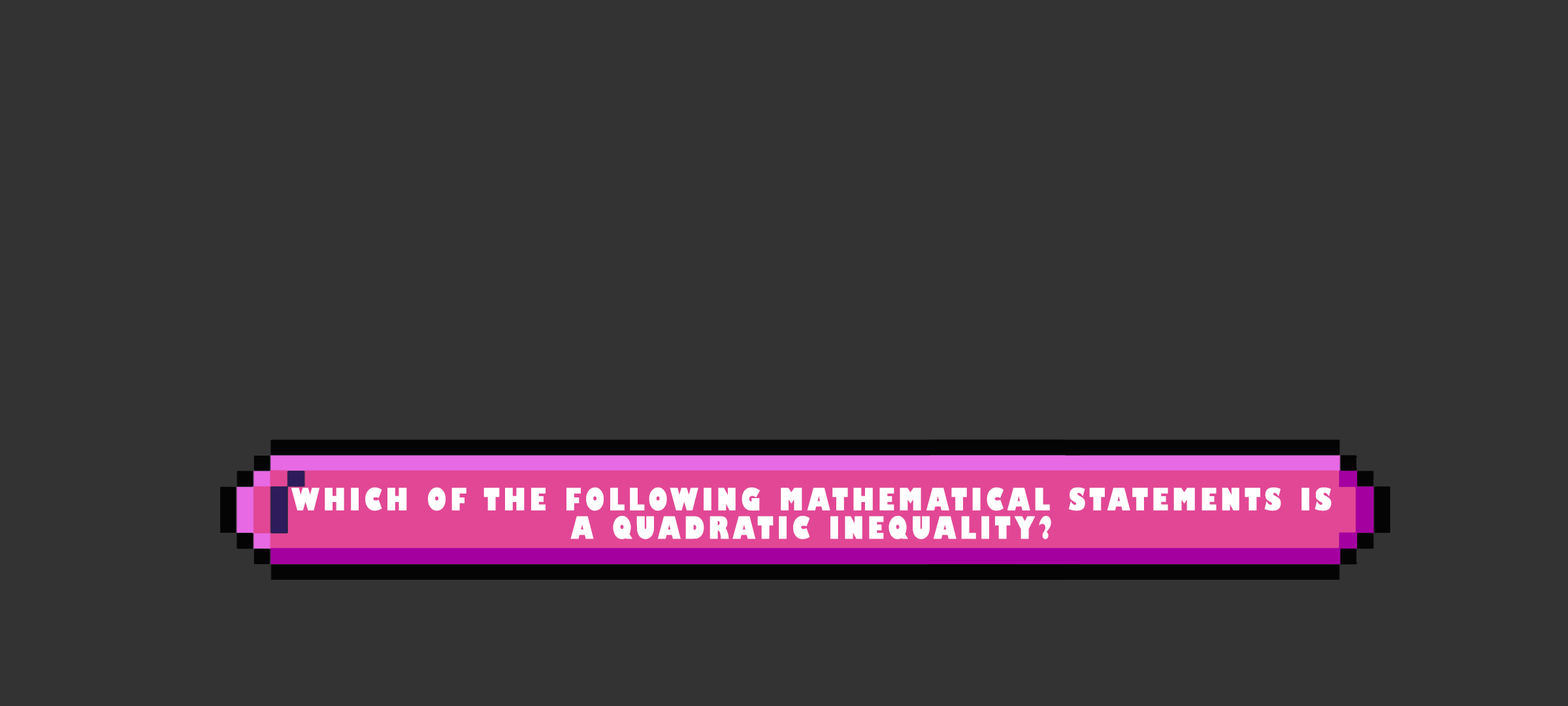
<style>
.page{position:relative;width:1568px;height:706px;background:#333333}
.page>*{position:absolute;margin:0}
.t1{font:30px/28.4px "GillSans-UltraBoldCondensed";letter-spacing:0.115em;color:#ffffff;text-transform:uppercase;scale:1.12 1}
</style>
<div class="page">
<p class="t1" style="left:291px;top:487px;width:1040px;height:52px;text-align:center">Which of the following mathematical statements is a quadratic inequality?</p>
</div>
